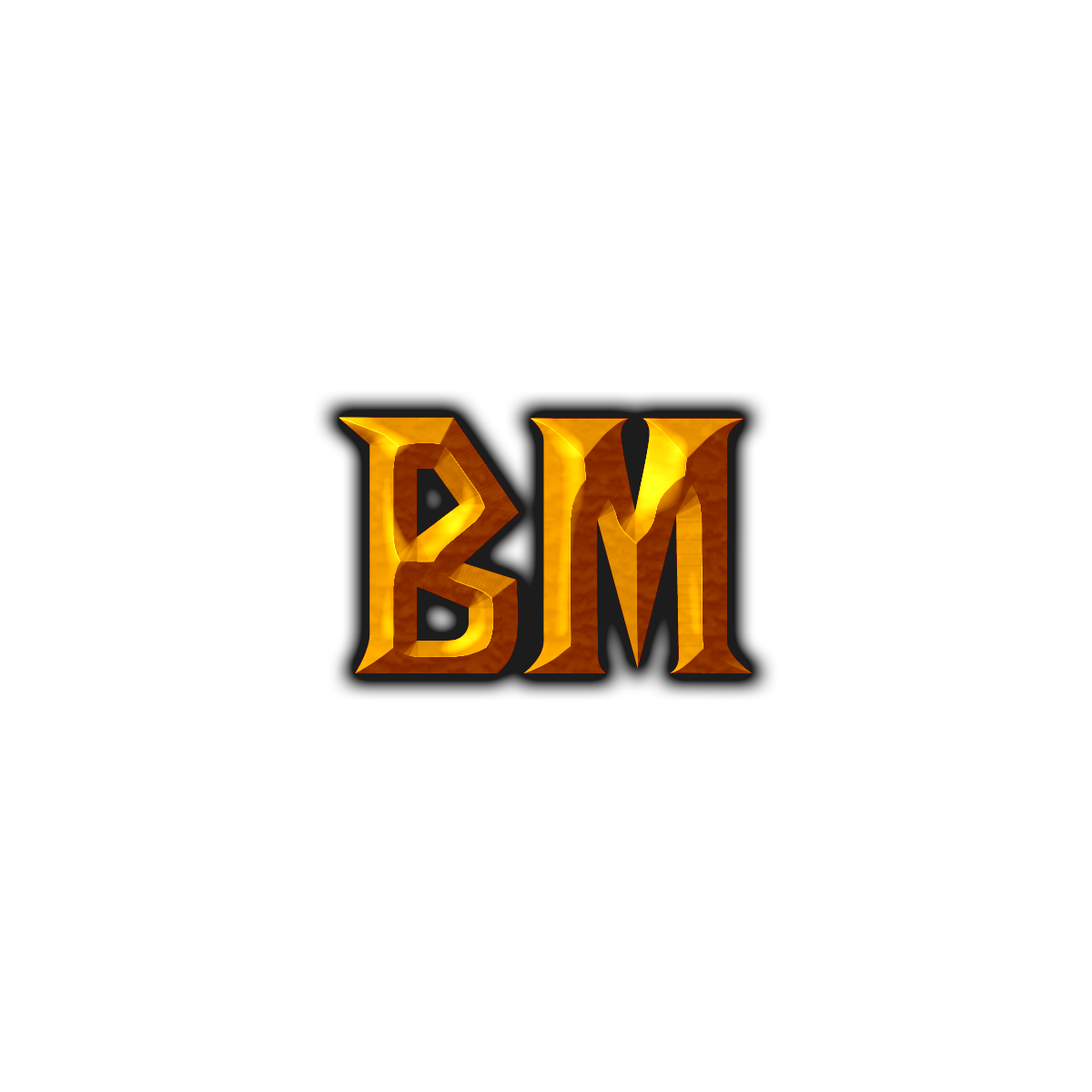
<style>
.page{position:relative;width:1092px;height:1092px;background:#ffffff}
.page>*{position:absolute;margin:0}
.t1{font:364px "LifeCraft"}
</style>
<div class="page">
<p class="t1" style="left:339px;top:417px;width:414px;height:256px">BM</p>
<p class="t1" style="left:339px;top:417px;width:414px;height:256px">BM</p>
<p class="t1" style="left:339px;top:417px;width:414px;height:256px">BM</p>
</div>
